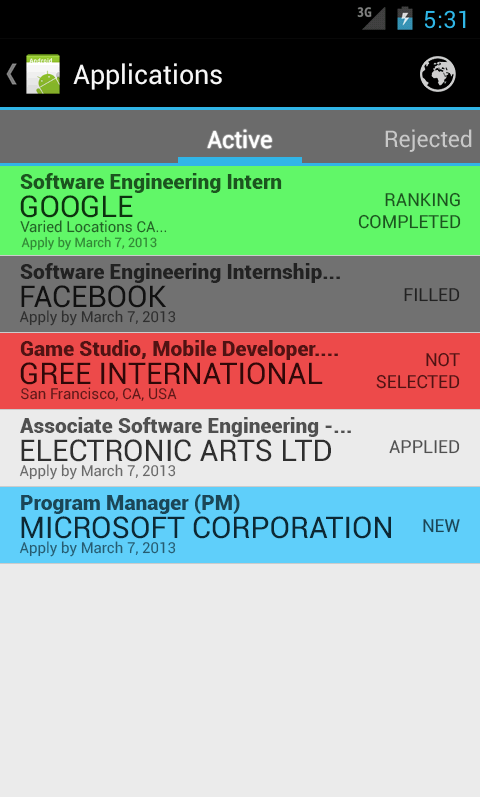
<style>
.page{position:relative;width:480px;height:797px;background:#ebebeb}
.page>*{position:absolute;margin:0}
.t1{font:24px "Roboto-Regular";color:#ffffff}
.t2{font:23px "Roboto-Regular";color:#c8c8c8}
.t3{font:21px "Roboto-Black";color:#1c551f}
.t4{font:30px "Roboto-Regular";color:#0d320f}
.t5{font:18px "Roboto-Regular";color:#1c551f}
.t6{font:15px "Roboto-Regular";color:#226325}
.t7{font:13px "Roboto-Regular";color:#328836}
.t8{font:21px "Roboto-Black";color:#222222}
.t9{font:30px "Roboto-Regular";color:#000000}
.t10{font:18px "Roboto-Regular";color:#222222}
.t11{font:15px "Roboto-Regular";color:#2f2f2f}
.t12{font:21px "Roboto-Black";color:#511313}
.t13{font:18px "Roboto-Regular";color:#511313}
.t14{font:30px "Roboto-Regular";color:#300808}
.t15{font:15px "Roboto-Regular";color:#5f1818}
.t16{font:21px "Roboto-Black";color:#505050}
.t17{font:30px "Roboto-Regular";color:#2f2f2f}
.t18{font:18px "Roboto-Regular";color:#505050}
.t19{font:15px "Roboto-Regular";color:#6a6a6a}
.t20{font:21px "Roboto-Black";color:#1b4656}
.t21{font:30px "Roboto-Regular";color:#0d2833}
.t22{font:18px "Roboto-Regular";color:#1b4656}
.t23{font:15px "Roboto-Regular";color:#265c71}
</style>
<div class="page">
<p class="t1" style="left:207px;top:129px;width:65px;height:20px">Active</p>
<p class="t2" style="left:385px;top:129px;width:87px;height:23px">Rejected</p>
<p class="t3" style="left:20px;top:173px;width:262px;height:20px">Software Engineering Intern</p>
<p class="t4" style="left:20px;top:195px;width:113px;height:23px">GOOGLE</p>
<p class="t5" style="left:358px;top:192px;width:103px;height:37px;text-align:right">RANKING<br>COMPLETED</p>
<p class="t6" style="left:20px;top:220px;width:147px;height:13px">Varied Locations CA...</p>
<p class="t7" style="left:21px;top:236px;width:136px;height:14px">Apply by March 7, 2013</p>
<p class="t8" style="left:20px;top:263px;width:320px;height:20px">Software Engineering Internship...</p>
<p class="t9" style="left:21px;top:285px;width:145px;height:23px;opacity:0.9">FACEBOOK</p>
<p class="t10" style="left:404px;top:288px;width:56px;height:14px">FILLED</p>
<p class="t11" style="left:19px;top:310px;width:157px;height:16px">Apply by March 7, 2013</p>
<p class="t12" style="left:20px;top:340px;width:318px;height:20px">Game Studio, Mobile Developer....</p>
<p class="t13" style="left:376px;top:352px;width:84px;height:37px;text-align:right">NOT<br>SELECTED</p>
<p class="t14" style="left:20px;top:362px;width:303px;height:23px">GREE INTERNATIONAL</p>
<p class="t15" style="left:21px;top:387px;width:156px;height:14px">San Francisco, CA, USA</p>
<p class="t16" style="left:20px;top:417px;width:331px;height:20px">Associate Software Engineering -...</p>
<p class="t17" style="left:21px;top:439px;width:310px;height:23px">ELECTRONIC ARTS LTD</p>
<p class="t18" style="left:389px;top:440px;width:71px;height:14px">APPLIED</p>
<p class="t19" style="left:19px;top:464px;width:157px;height:16px">Apply by March 7, 2013</p>
<p class="t20" style="left:21px;top:494px;width:219px;height:20px">Program Manager (PM)</p>
<p class="t21" style="left:21px;top:516px;width:370px;height:23px">MICROSOFT CORPORATION</p>
<p class="t22" style="left:423px;top:519px;width:37px;height:14px">NEW</p>
<p class="t23" style="left:19px;top:541px;width:157px;height:16px">Apply by March 7, 2013</p>
</div>
